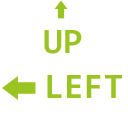
<style>
.page{position:relative;width:128px;height:128px;background:#ffffff}
.page>*{position:absolute;margin:0}
.t1{font:36px "Consolas-Bold";color:#9ac422}
</style>
<div class="page">
<p class="t1" style="left:44px;top:30px;width:38px;height:24px">UP</p>
<p class="t1" style="left:47px;top:75px;width:75px;height:23px">LEFT</p>
</div>
